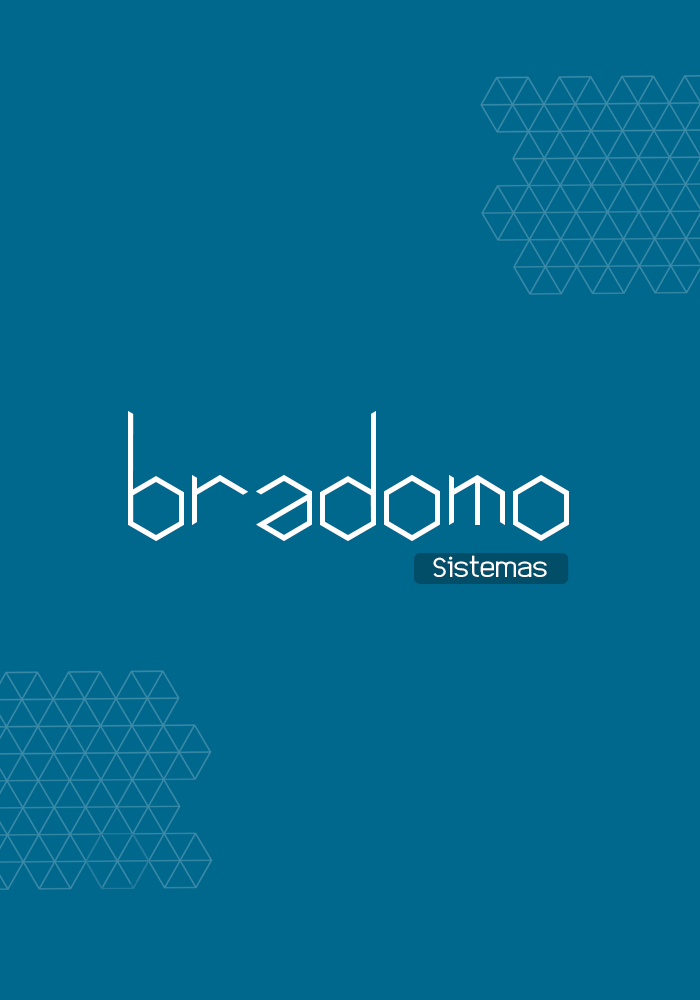
<style>
.page{position:relative;width:700px;height:1000px;background:#00678d}
.page>*{position:absolute;margin:0}
.t1{font:130px "Hexafont";color:#ffffff}
.t2{font:19.8px "EleganTech";color:#ffffff;scale:1.13 1}
</style>
<div class="page">
<p class="t1" style="left:128px;top:411px;width:441px;height:130px">bradomo</p>
<p class="t2" style="left:433px;top:555px;width:114px;height:22px">Sistemas</p>
</div>
